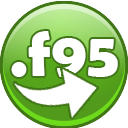
<style>
.page{position:relative;width:128px;height:128px;background:#ffffff}
.page>*{position:absolute;margin:0}
.t1{font:63px "BerlinSansFBDemi-Bold";color:#ffffff}
</style>
<div class="page">
<p class="t1" style="left:11px;top:31px;width:107px;height:46px">.f95</p>
</div>
